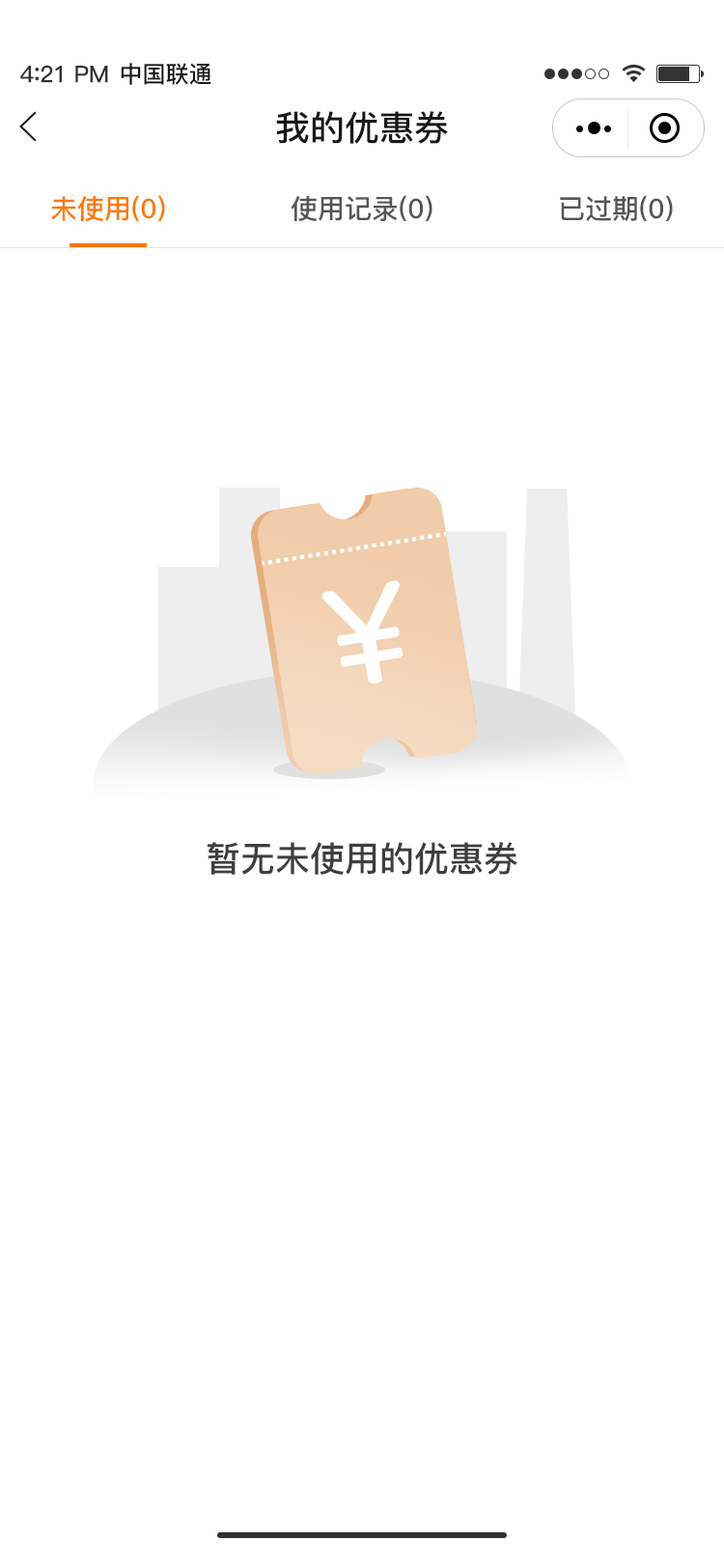
<style>
.page{position:relative;width:724px;height:1568px;background:#ffffff}
.page>*{position:absolute;margin:0}
.t1{font:23.2px "PingFang-SC-Bold";letter-spacing:-0.02em;color:#333333}
.t2{font:25.1px "PingFang-SC-Bold";letter-spacing:-0.02em;color:#333333}
.t3{font:23.2px "PingFang-SC-Bold";color:#181818}
.t4{font:34.8px "PingFang-SC-Bold";color:#181818}
.t5{font:27px "PingFang-SC-Bold";color:#ff7800}
.t6{font:27px "PingFang-SC-Bold";color:#555555}
.t7{font:34.8px "PingFang-SC-Bold";color:#3e3e3e}
</style>
<div class="page">
<p class="t1" style="left:20px;top:65px;width:88px;height:18px">4<span class="t2">:</span>21 PM</p>
<p class="t3" style="left:121px;top:63px;width:90px;height:22px">中国联通</p>
<p class="t4" style="left:276px;top:111px;width:172px;height:33px">我的优惠券</p>
<p class="t5" style="left:51px;top:195px;width:114px;height:26px">未使用(0)</p>
<p class="t6" style="left:291px;top:195px;width:142px;height:26px">使用记录(0)</p>
<p class="t6" style="left:560px;top:195px;width:113px;height:26px">已过期(0)</p>
<p class="t7" style="left:208px;top:842px;width:310px;height:33px">暂无未使用的优惠券</p>
</div>
